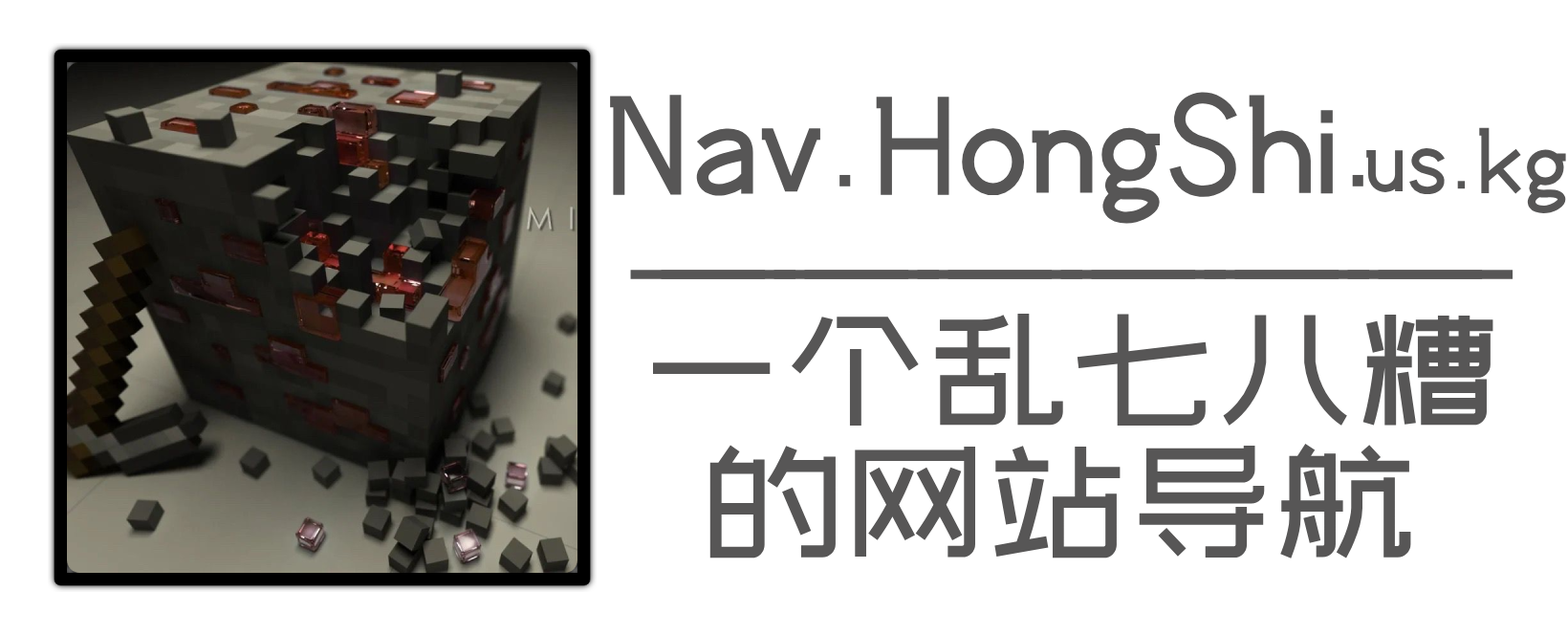
<style>
.page{position:relative;width:1568px;height:635px;background:#ffffff}
.page>*{position:absolute;margin:0}
.t1{font:143.4px "zcoolwenyiti";color:#575656}
.t2{font:95.6px "zcoolwenyiti";color:#575656}
</style>
<div class="page">
<p class="t1" style="left:610px;top:92px;width:753px;height:132px">Nav.HongShi.</p>
<p class="t2" style="left:1366px;top:127px;width:200px;height:86px">us.kg</p>
<p class="t1" style="left:630px;top:270px;width:853px;height:9px">——————</p>
<p class="t1" style="left:661px;top:270px;width:853px;height:9px">——————</p>
<p class="t1" style="left:653px;top:314px;width:840px;height:111px">一个乱七八糟</p>
<p class="t1" style="left:709px;top:443px;width:702px;height:115px">的网站导航</p>
</div>
